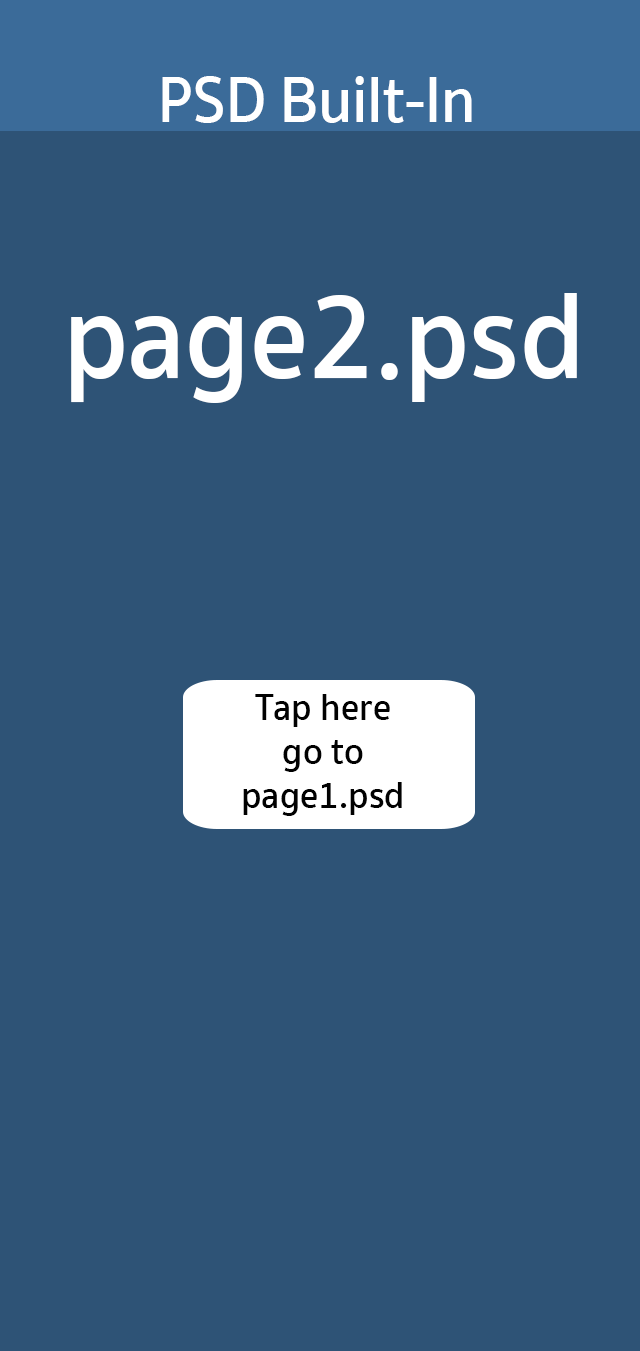
<style>
.page{position:relative;width:640px;height:1351px;background:#2e5376}
.page>*{position:absolute;margin:0}
.t1{font:66.6px "SukhumvitSet-SemiBold";color:#ffffff;scale:0.91 1}
.t2{font:125.8px "SukhumvitSet-SemiBold";color:#ffffff;scale:0.91 1}
.t3{font:39.4px/44px "SukhumvitSet-SemiBold";color:#010101;scale:0.91 1}
</style>
<div class="page">
<p class="t1" style="left:162px;top:76px;width:310px;height:47px">PSD Built-In</p>
<p class="t2" style="left:71px;top:293px;width:506px;height:110px">page2.psd</p>
<p class="t3" style="left:243px;top:694px;width:159px;height:122px;text-align:center">Tap here<br>go to<br>page1.psd</p>
</div>
